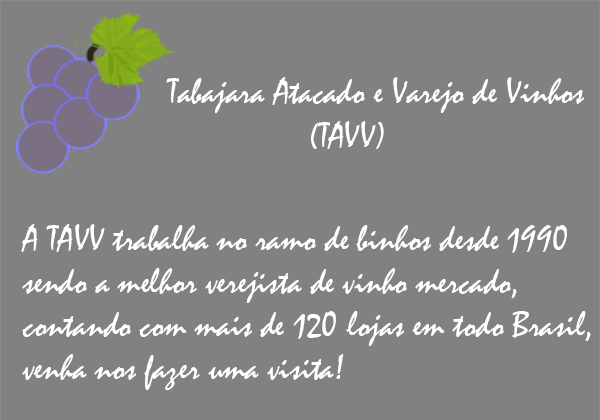
<style>
.page{position:relative;width:600px;height:420px;background:#818181}
.page>*{position:absolute;margin:0}
.t1{font:36px "Mistral";color:#ffffff}
</style>
<div class="page">
<p class="t1" style="left:166px;top:77px;width:418px;height:72px">Tabajara Atacado e Varejo de Vinhos <br>   (TAVV)</p>
<p class="t1" style="left:21px;top:224px;width:570px;height:166px">A TAVV trabalha no ramo de binhos desde 1990 <br>sendo a melhor verejista de vinho mercado, <br>contando com mais de 120 lojas em todo Brasil, <br>venha nos fazer uma visita!</p>
</div>
